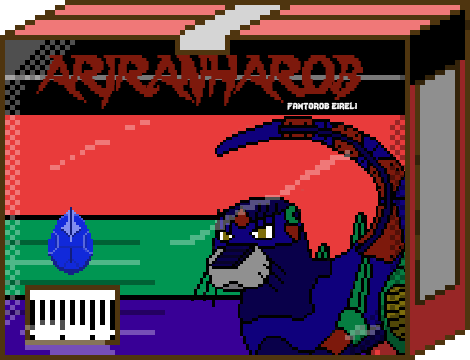
<style>
.page{position:relative;width:470px;height:360px}
.page>*{position:absolute;margin:0}
.t1{font:48px "Lady-Radical";color:#7d190c;scale:0.72 1}
.t2{font:12px "Lady-Radical";color:#fbfbfb}
</style>
<div class="page">
<p class="t1" style="left:36px;top:55px;width:327px;height:54px">ARIRANHAROB</p>
<p class="t2" style="left:287px;top:102px;width:70px;height:8px">fantorob eireli</p>
</div>
